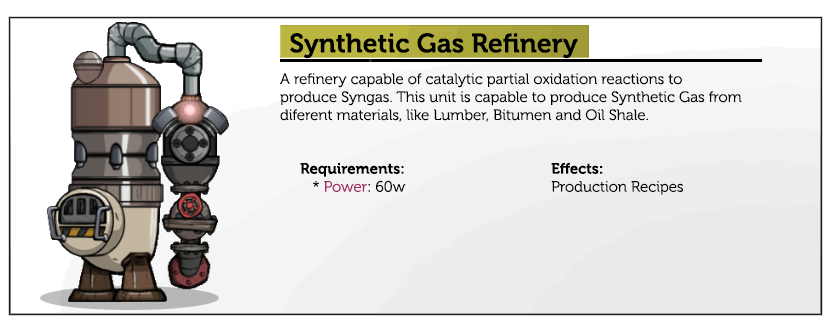
<style>
.page{position:relative;width:830px;height:330px;background:#ffffff}
.page>*{position:absolute;margin:0}
.t1{font:26.7px "Museo-700";color:#000000}
.t2{font:15px "Museo-300";color:#000000}
.t3{font:15px "Museo-700";color:#000000}
.t4{font:15px "Museo-300";color:#a12864}
</style>
<div class="page">
<p class="t1" style="left:290px;top:33px;width:288px;height:26px">Synthetic Gas Refinery</p>
<p class="t2" style="left:280px;top:73px;width:462px;height:49px">A refinery capable of catalytic partial oxidation reactions to produce Syngas. This unit is capable to produce Synthetic Gas from diferent materials, like Lumber, Bitumen and Oil Shale.</p>
<p class="t3" style="left:300px;top:163px;width:106px;height:29px">Requirements:<br><span class="t2">   * </span><span class="t4">Power</span><span class="t2">: 60w</span></p>
<p class="t2" style="left:551px;top:162px;width:132px;height:33px"><span class="t3">Effects:</span><br>Production Recipes</p>
</div>
